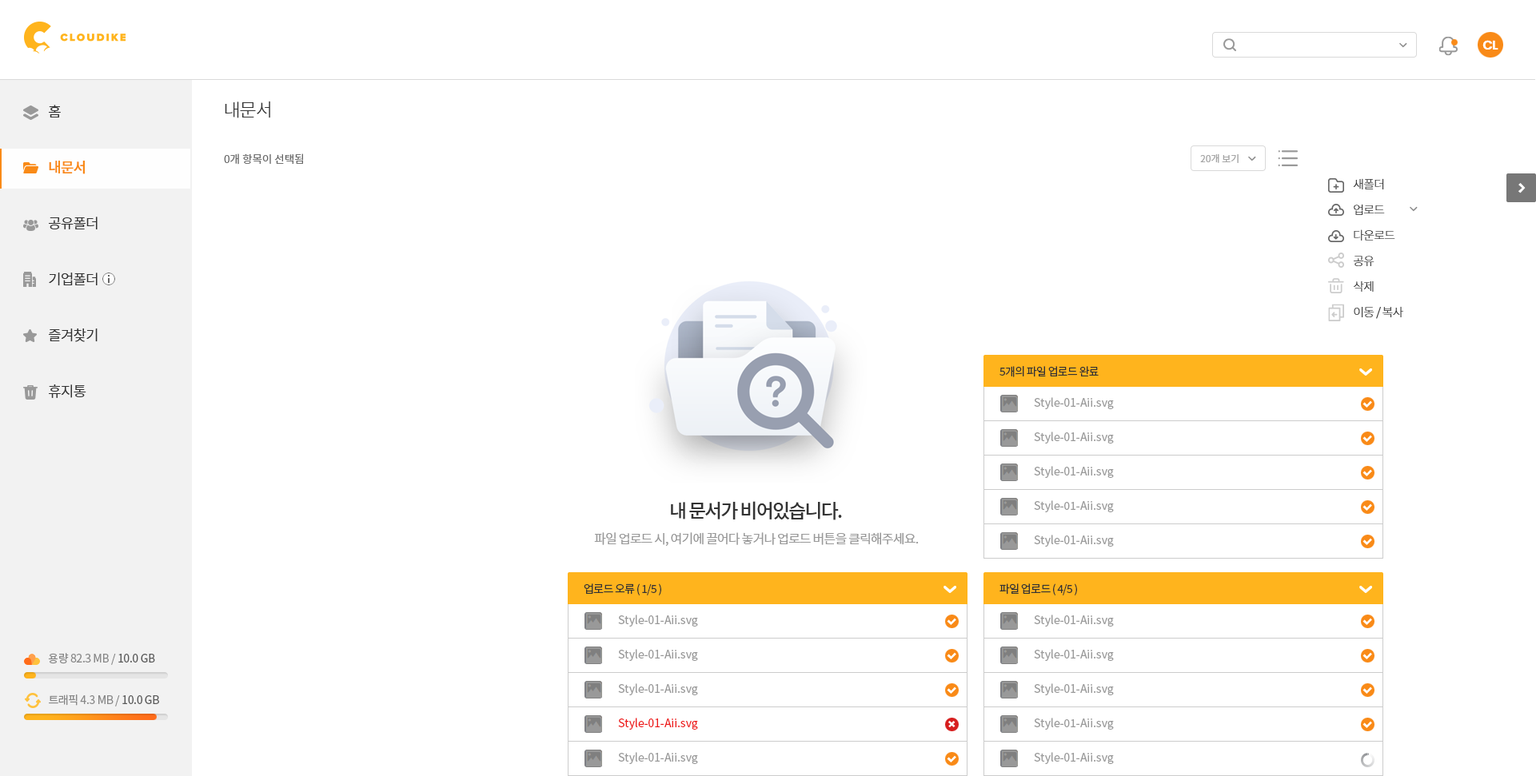
<style>
.page{position:relative;width:1536px;height:776px;background:#ffffff}
.page>*{position:absolute;margin:0}
.t1{font:12.8px "Poppins-SemiBold";letter-spacing:-0.05em;color:#ffffff}
.t2{font:18.4px "NotoSansCJKkr-Light";letter-spacing:-0.05em;color:#333333}
.t3{font:14.4px/56px "NotoSansCJKkr-DemiLight";letter-spacing:-0.05em;color:#333333}
.t4{font:14.4px/56px "NotoSansCJKkr-Medium";letter-spacing:-0.05em;color:#f98a17}
.t5{font:10.8px "NotoSansCJKkr-DemiLight";color:#666666}
.t6{font:9.6px "NotoSansCJKkr-DemiLight";color:#a1a1a1}
.t7{font:12px/25.6px "NotoSansCJKkr-Light";letter-spacing:-0.05em;color:#333333}
.t8{font:11.2px "NotoSansCJKkr-Regular";letter-spacing:-0.05em;color:#333333}
.t9{font:11.2px "NotoSansCJKkr-Regular";color:#999999}
.t10{font:19.2px "NotoSansCJKkr-Medium";letter-spacing:-0.075em;color:#333333}
.t11{font:12.8px "NotoSansCJKkr-DemiLight";letter-spacing:-0.05em;color:#999999}
.t12{font:11.2px "NotoSansCJKkr-Regular";letter-spacing:-0.025em;color:#888888}
.t13{font:11.2px "NotoSansCJKkr-Regular";letter-spacing:-0.025em;color:#585858}
.t14{font:11.2px "NotoSansCJKkr-Regular";color:#ee1a1a}
</style>
<div class="page">
<p class="t1" style="left:1482px;top:40px;width:16px;height:10px">CL</p>
<p class="t2" style="left:225px;top:101px;width:45px;height:17px">내문서</p>
<p class="t3" style="left:49px;top:105px;width:49px;height:293px">홈<br><span class="t4">내문서<br></span>공유폴더<br>기업폴더<br>즐겨찾기<br>휴지통</p>
<p class="t5" style="left:224px;top:154px;width:79px;height:11px">0개 항목이 선택됨</p>
<p class="t6" style="left:1200px;top:154px;width:38px;height:9px">20개 보기</p>
<p class="t7" style="left:1353px;top:178px;width:50px;height:141px">새폴더<br>업로드<br>다운로드<br>공유<br>삭제<br>이동 / 복사</p>
<p class="t8" style="left:999px;top:366px;width:100px;height:11px">5개의 파일 업로드 완료</p>
<p class="t9" style="left:1034px;top:397px;width:80px;height:12px">Style-01-Aii.svg</p>
<p class="t9" style="left:1034px;top:432px;width:80px;height:12px">Style-01-Aii.svg</p>
<p class="t9" style="left:1034px;top:466px;width:80px;height:12px">Style-01-Aii.svg</p>
<p class="t10" style="left:671px;top:501px;width:171px;height:20px">내 문서가 비어있습니다.</p>
<p class="t9" style="left:1034px;top:501px;width:80px;height:12px">Style-01-Aii.svg</p>
<p class="t11" style="left:594px;top:532px;width:325px;height:14px">파일 업로드 시, 여기에 끌어다 놓거나 업로드 버튼을 클릭해주세요.</p>
<p class="t9" style="left:1034px;top:535px;width:80px;height:12px">Style-01-Aii.svg</p>
<p class="t8" style="left:584px;top:584px;width:77px;height:12px">업로드 오류 ( 1/5 )</p>
<p class="t8" style="left:999px;top:584px;width:78px;height:12px">파일 업로드 ( 4/5 )</p>
<p class="t9" style="left:618px;top:615px;width:80px;height:12px">Style-01-Aii.svg</p>
<p class="t9" style="left:1034px;top:615px;width:80px;height:12px">Style-01-Aii.svg</p>
<p class="t12" style="left:48px;top:653px;width:107px;height:12px">용량 82.3 MB / <span class="t13">10.0 GB</span></p>
<p class="t9" style="left:618px;top:649px;width:80px;height:12px">Style-01-Aii.svg</p>
<p class="t9" style="left:1034px;top:649px;width:80px;height:12px">Style-01-Aii.svg</p>
<p class="t9" style="left:618px;top:684px;width:80px;height:12px">Style-01-Aii.svg</p>
<p class="t9" style="left:1034px;top:684px;width:80px;height:12px">Style-01-Aii.svg</p>
<p class="t12" style="left:49px;top:695px;width:110px;height:12px">트래픽 4.3 MB / <span class="t13">10.0 GB</span></p>
<p class="t14" style="left:618px;top:718px;width:80px;height:12px">Style-01-Aii.svg</p>
<p class="t9" style="left:1034px;top:718px;width:80px;height:12px">Style-01-Aii.svg</p>
<p class="t9" style="left:618px;top:752px;width:80px;height:12px">Style-01-Aii.svg</p>
<p class="t9" style="left:1034px;top:752px;width:80px;height:12px">Style-01-Aii.svg</p>
</div>
